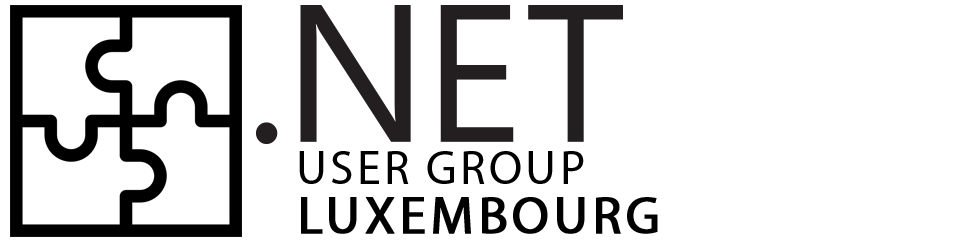
<style>
.page{position:relative;width:960px;height:243px;background:#ffffff}
.page>*{position:absolute;margin:0}
.t1{font:48px "MyriadPro-Regular";letter-spacing:0.065em;color:#000000;text-transform:uppercase}
.t2{font:53px "MyriadPro-Regular";letter-spacing:0.065em;color:#000000;text-transform:uppercase;font-weight:bold}
</style>
<div class="page">
<p class="t1" style="left:299px;top:151px;width:285px;height:33px">User Group</p>
<p class="t2" style="left:301px;top:197px;width:357px;height:37px">LUXEMBOURG</p>
</div>
